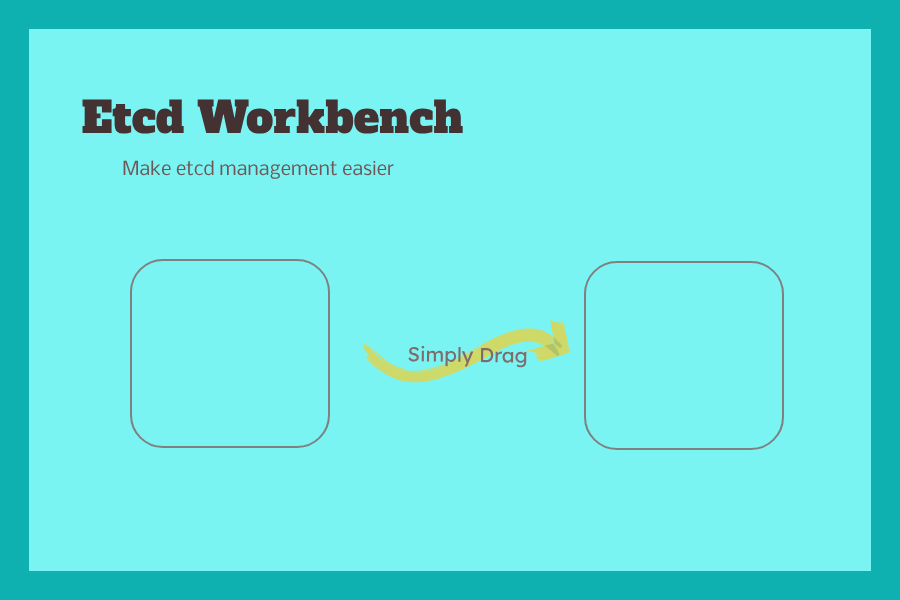
<style>
.page{position:relative;width:900px;height:600px;background:#79f4f3}
.page>*{position:absolute;margin:0}
.t1{font:43px "AlfaSlabOne-Regular";color:#443232}
.t2{font:18.3px "Nobile-Regular";color:#705757}
.t3{font:20.2px "Lexend-Regular";color:#806b6b}
</style>
<div class="page">
<p class="t1" style="left:82px;top:99px;width:381px;height:35px">Etcd Workbench</p>
<p class="t2" style="left:123px;top:160px;width:271px;height:19px">Make etcd management easier</p>
<p class="t3" style="left:408px;top:345px;width:119px;height:23px;rotate:1deg">Simply Drag</p>
</div>
